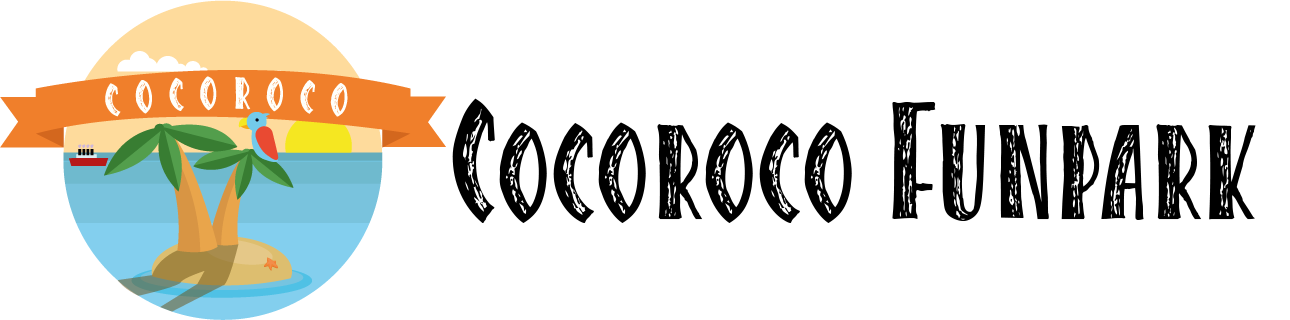
<style>
.page{position:relative;width:1290px;height:320px;background:#ffffff}
.page>*{position:absolute;margin:0}
.t1{font:150px "CaribbeanITC-Roman";color:#000000}
</style>
<div class="page">
<p class="t1" style="left:452px;top:98px;width:804px;height:125px">Cocoroco Funpark</p>
</div>
